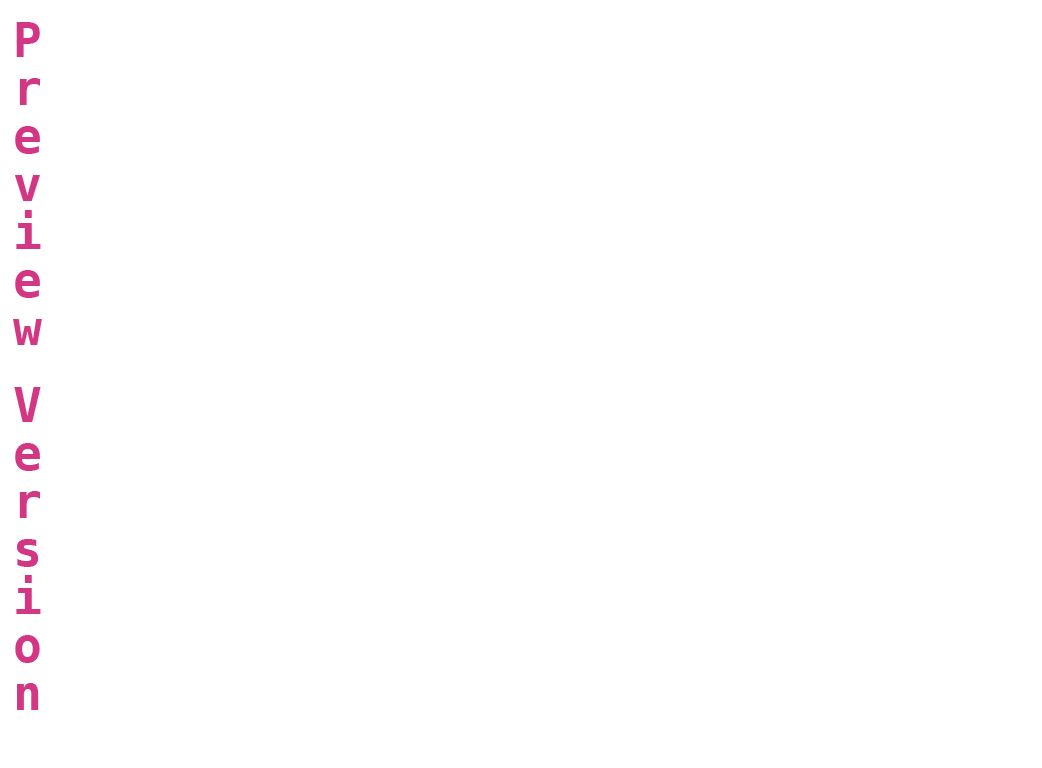
<style>
.page{position:relative;width:1042px;height:768px;background:#ffffff}
.page>*{position:absolute;margin:0}
.t1{font:48px "Menlo-Bold";color:#d33682}
</style>
<div class="page">
<p class="t1" style="left:13px;top:22px;width:29px;height:688px;text-align:center">Preview Version</p>
</div>
